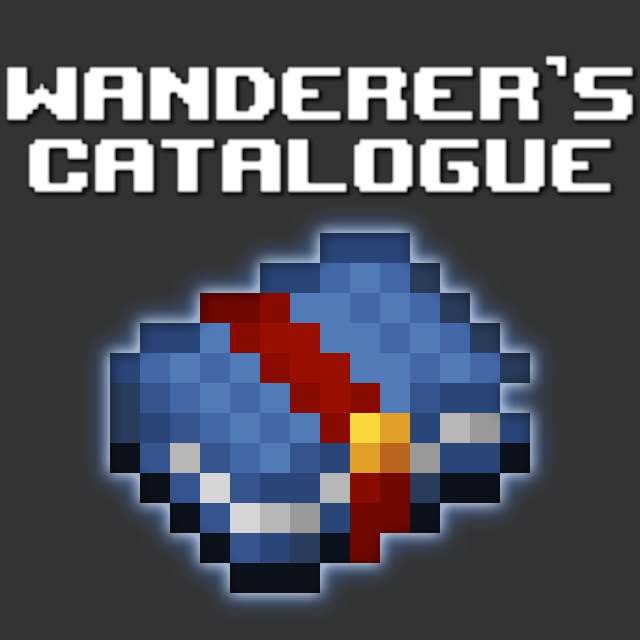
<style>
.page{position:relative;width:640px;height:640px;background:#333333}
.page>*{position:absolute;margin:0}
.t1{font:110px/72px "UpheavalTT-BRK-";color:#ffffff}
</style>
<div class="page">
<p class="t1" style="left:6px;top:55px;width:628px;height:138px;text-align:center">Wanderer’s<br>Catalogue</p>
</div>
